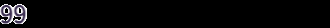
<style>
.page{position:relative;width:330px;height:28px;background:#000000}
.page>*{position:absolute;margin:0}
.t1{font:24px "WebPSD-18463539-0-Regular";color:#3f3254;font-weight:bold}
</style>
<div class="page">
<p class="t1" style="left:0px;top:0px;width:330px;height:28px">99</p>
</div>
